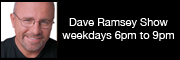
<style>
.page{position:relative;width:180px;height:60px;background:#000000}
.page>*{position:absolute;margin:0}
.t1{font:11px "HelveticaNeue";color:#ffffff}
</style>
<div class="page">
<p class="t1" style="left:62px;top:18px;width:112px;height:23px;text-align:center">Dave Ramsey Show<br>weekdays 6pm to 9pm</p>
</div>
